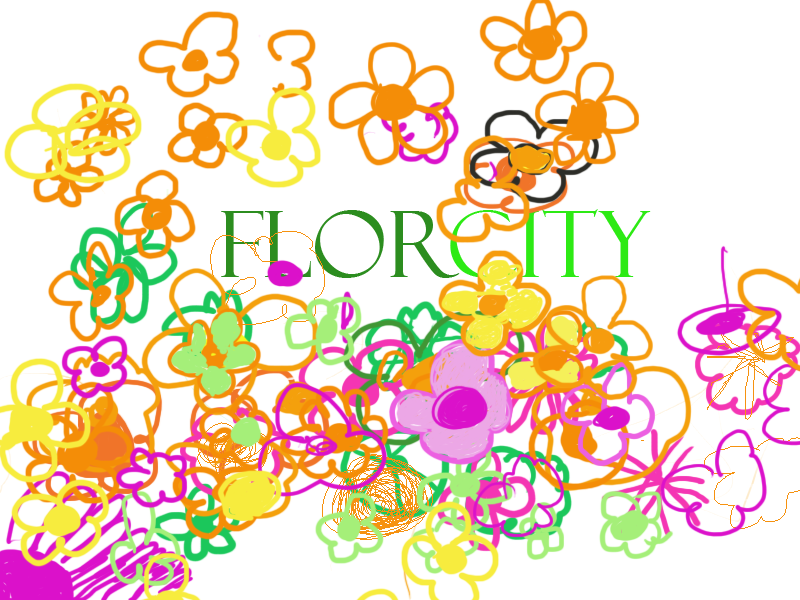
<style>
.page{position:relative;width:800px;height:600px;background:#ffffff}
.page>*{position:absolute;margin:0}
.t1{font:92.2px "FelixTitlingMT";color:#2c8d1f}
.t2{font:92.2px "FelixTitlingMT";color:#2dea14}
</style>
<div class="page">
<p class="t1" style="left:221px;top:209px;width:430px;height:69px">FLOR<span class="t2">CITY</span></p>
</div>
